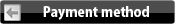
<style>
.page{position:relative;width:175px;height:24px;background:#4d4d4d}
.page>*{position:absolute;margin:0}
.t1{font:13.2px "KozGoPro-Heavy";color:#ffffff}
</style>
<div class="page">
<p class="t1" style="left:43px;top:6px;width:106px;height:14px">Payment method</p>
</div>
